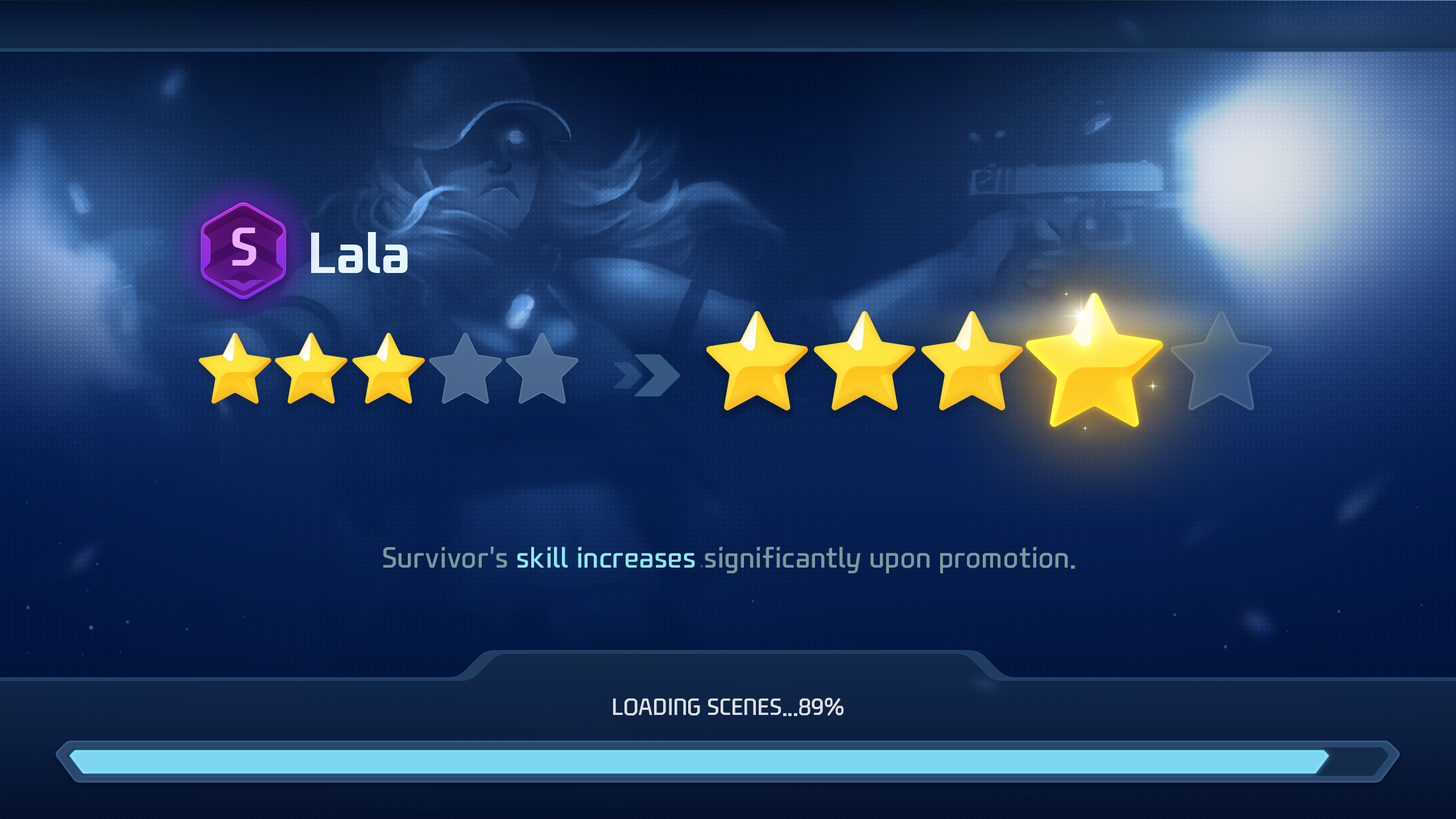
<style>
.page{position:relative;width:1456px;height:819px}
.page>*{position:absolute;margin:0}
.t1{font:52.4px "NEXONFootballGothicB";color:#ecaeff}
.t2{font:55.7px "NEXONFootballGothicB";color:#e6f6ff}
.t3{font:28.4px "NEXONFootballGothicL";color:#7b999f}
.t4{font:28.4px "NEXONFootballGothicL";color:#8ce9f8}
.t5{font:22.7px "NEXONFootballGothicL";color:#dedfe2;text-transform:uppercase}
</style>
<div class="page">
<p class="t1" style="left:232px;top:227px;width:25px;height:39px">S</p>
<p class="t2" style="left:311px;top:232px;width:97px;height:41px">Lala</p>
<p class="t3" style="left:383px;top:547px;width:692px;height:26px">Survivor's <span class="t4">skill increases</span> significantly upon promotion.</p>
<p class="t5" style="left:613px;top:698px;width:230px;height:18px">Loading Scenes...89%</p>
</div>
